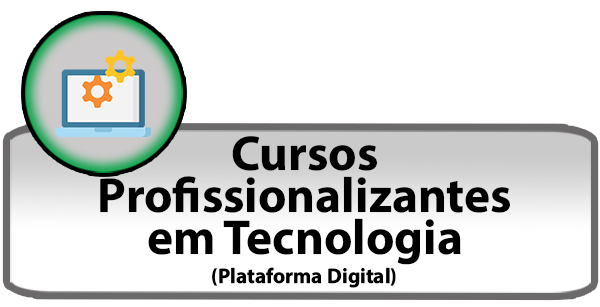
<style>
.page{position:relative;width:600px;height:307px;background:#ffffff}
.page>*{position:absolute;margin:0}
.t1{font:49.4px/42.3px "MyriadConceptRoman-Bold";color:#000000}
.t2{font:21.2px/28.2px "MyriadConceptRoman-Bold";color:#000000}
</style>
<div class="page">
<p class="t1" style="left:100px;top:136px;width:410px;height:152px;text-align:center">Cursos<br>Profissionalizantes<br>em Tecnologia<br><span class="t2">(Plataforma Digital)</span></p>
</div>
